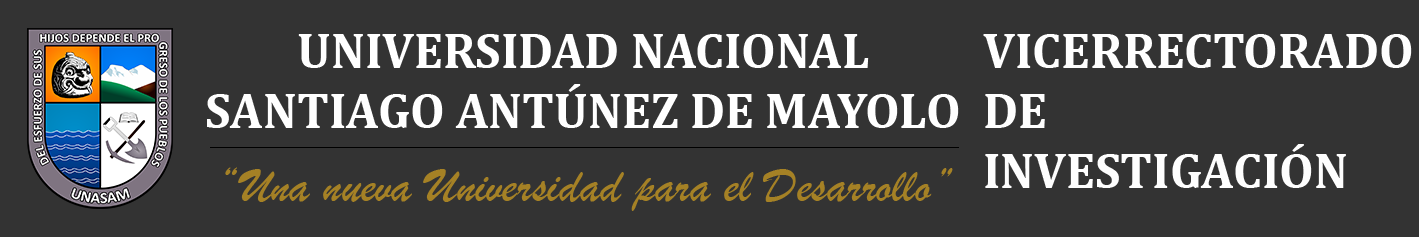
<style>
.page{position:relative;width:1419px;height:237px;background:#333333}
.page>*{position:absolute;margin:0}
.t1{font:50px "Cambria-Bold";color:#ffffff}
.t2{font:50px "Cambria-Bold";color:#fefefe}
.t3{font:50px "BrushScriptMT";color:#a58125}
</style>
<div class="page">
<p class="t1" style="left:207px;top:34px;width:752px;height:94px;text-align:center">UNIVERSIDAD NACIONAL<br>SANTIAGO ANTÚNEZ DE MAYOLO</p>
<p class="t2" style="left:983px;top:34px;width:429px;height:154px">VICERRECTORADO<br>DE<br>INVESTIGACIÓN</p>
<p class="t3" style="left:225px;top:167px;width:728px;height:44px">“Una nueva Universidad para el Desarrollo”</p>
</div>
